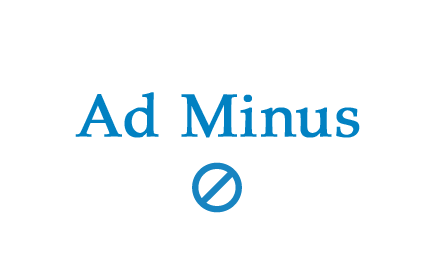
<style>
.page{position:relative;width:440px;height:280px;background:#ffffff}
.page>*{position:absolute;margin:0}
.t1{font:60px "Palatino-Roman";letter-spacing:0.025em;color:#0181c2;font-weight:bold}
</style>
<div class="page">
<p class="t1" style="left:75px;top:92px;width:285px;height:46px">Ad Minus</p>
</div>
